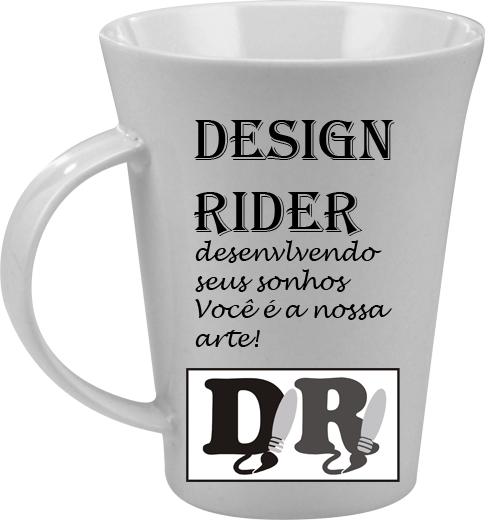
<style>
.page{position:relative;width:485px;height:520px;background:#ffffff}
.page>*{position:absolute;margin:0}
.t1{font:24px "LucidaHandwriting-Italic";color:#000000}
.t2{font:60px "Algerian";color:#000000}
</style>
<div class="page">
<p class="t1" style="left:194px;top:120px;width:201px;height:227px"><span class="t2">Design<br>Rider<br></span>desenvlvendo <br>seus sonhos<br>Você é a nossa<br>arte!</p>
</div>
